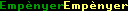
<style>
.page{position:relative;width:128px;height:11px;background:#000000}
.page>*{position:absolute;margin:0}
.t1{font:13.2px "Onesize";color:#009900;scale:0.91 1}
.t2{font:13.2px "Onesize";color:#ffff66;scale:0.91 1}
</style>
<div class="page">
<p class="t1" style="left:0px;top:1px;width:64px;height:10px">Empenyer</p>
<p class="t2" style="left:64px;top:1px;width:64px;height:10px">Empenyer</p>
</div>
